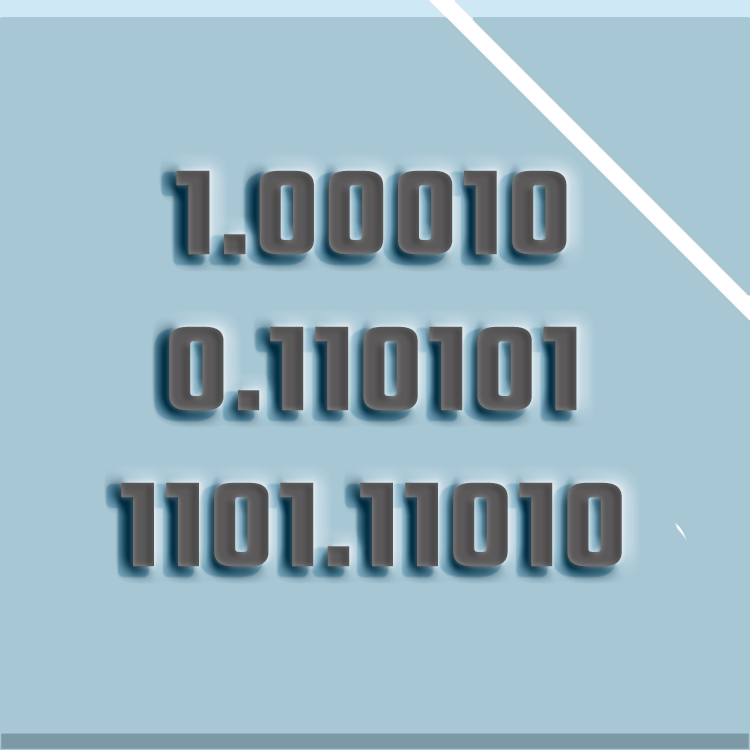
<style>
.page{position:relative;width:750px;height:750px;background:#a8c7d5}
.page>*{position:absolute;margin:0}
.t1{font:130px "Teko-SemiBold";color:#5a5858;font-weight:bold;scale:1.09 1}
</style>
<div class="page">
<p class="t1" style="left:121px;top:170px;width:501px;height:397px;text-align:center">1.00010<br>0.110101<br>1101.11010</p>
</div>
